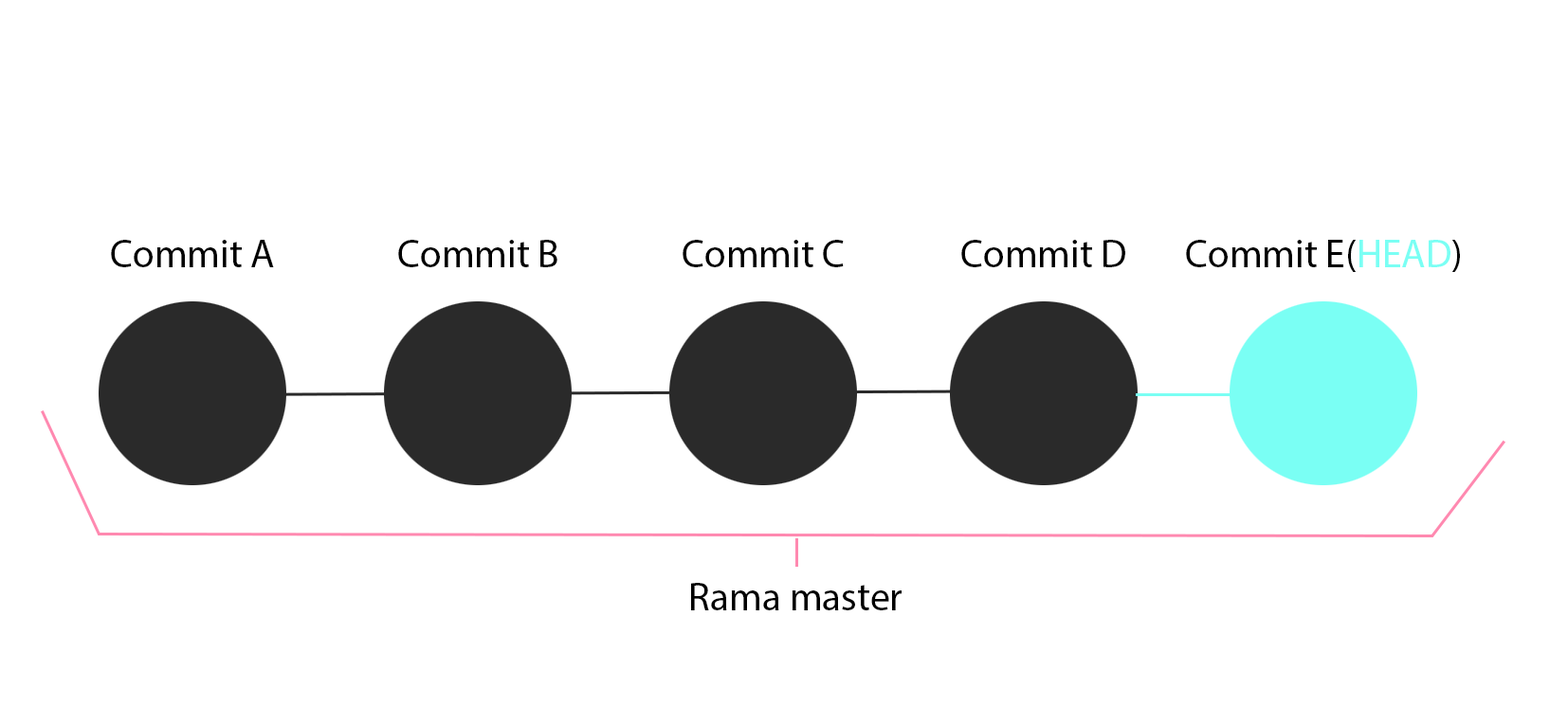
<style>
.page{position:relative;width:1568px;height:725px;background:#ffffff}
.page>*{position:absolute;margin:0}
.t1{font:39.5px "MyriadPro-Regular";color:#000000}
.t2{font:39.5px "MyriadPro-Regular";color:#7afff4}
</style>
<div class="page">
<p class="t1" style="left:111px;top:240px;width:163px;height:27px">Commit A</p>
<p class="t1" style="left:398px;top:240px;width:159px;height:27px">Commit B</p>
<p class="t1" style="left:683px;top:240px;width:161px;height:27px">Commit C</p>
<p class="t1" style="left:961px;top:240px;width:164px;height:27px">Commit D</p>
<p class="t1" style="left:1186px;top:240px;width:274px;height:32px">Commit E(<span class="t2">HEAD</span>)</p>
<p class="t1" style="left:691px;top:583px;width:211px;height:28px">Rama master</p>
</div>
